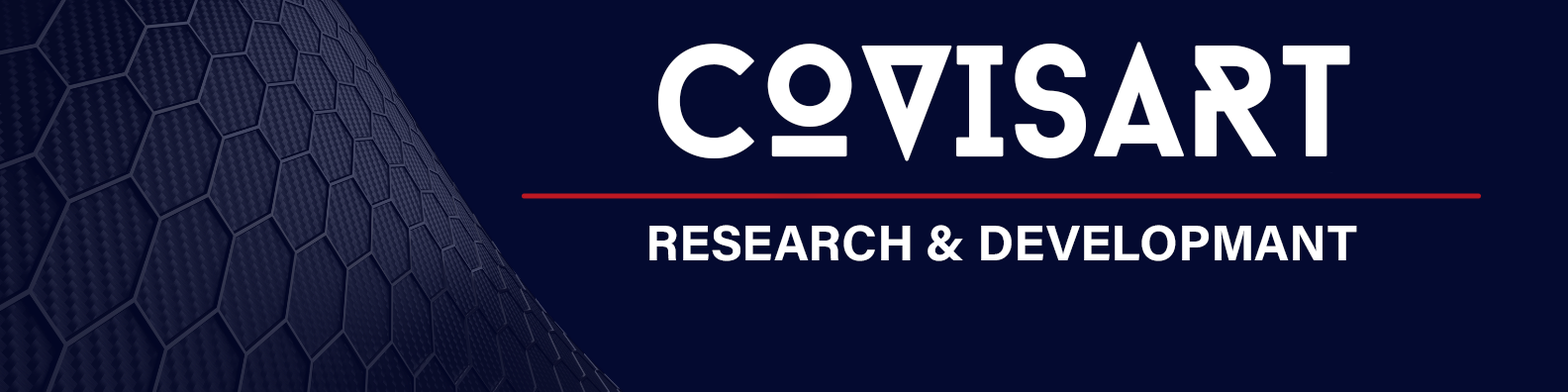
<style>
.page{position:relative;width:1568px;height:392px;background:#040a30}
.page>*{position:absolute;margin:0}
.t1{font:158.4px "BaronNeueBold";color:#ffffff}
.t2{font:50.2px "AcuminConcept-Bold";color:#ffffff}
</style>
<div class="page">
<p class="t1" style="left:658px;top:42px;width:692px;height:119px">COVISART</p>
<p class="t2" style="left:649px;top:225px;width:708px;height:36px">RESEARCH &amp; DEVELOPMANT</p>
</div>
